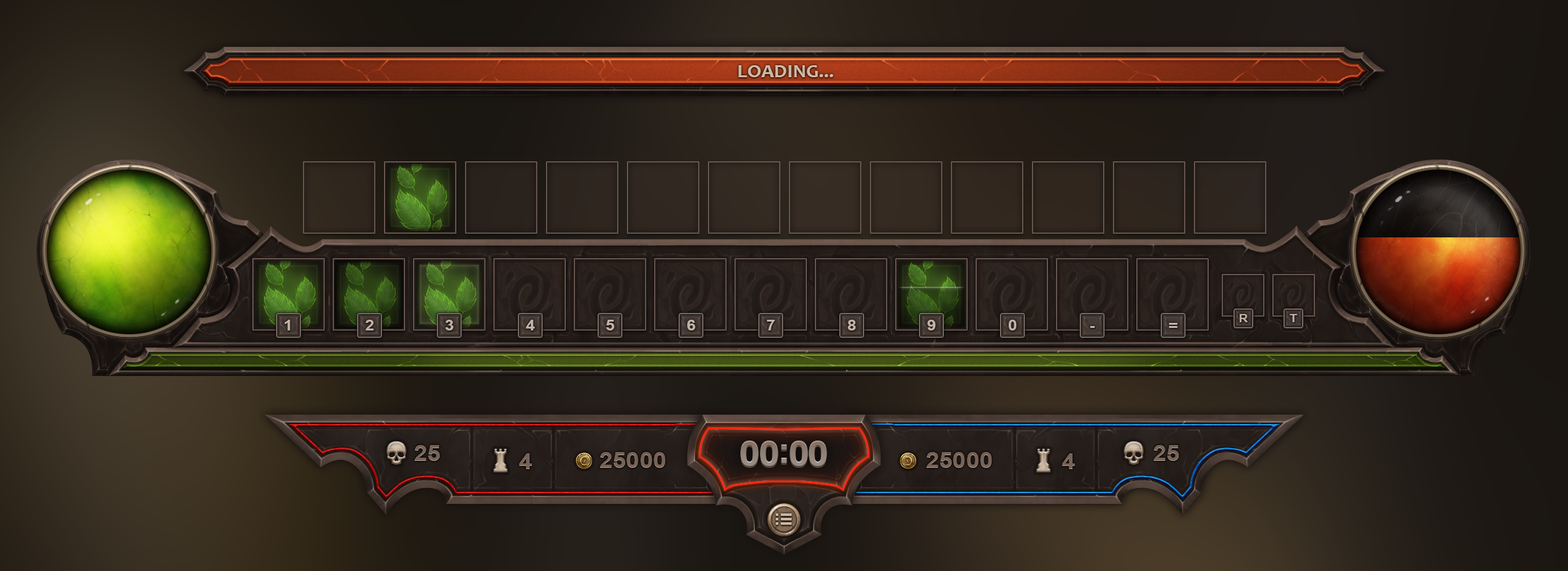
<style>
.page{position:relative;width:1568px;height:571px}
.page>*{position:absolute;margin:0}
.t1{font:18.2px "Candara-Bold";color:#cfbaa4;text-transform:uppercase;scale:1.11 1}
.t2{font:11.4px "Arial-BoldMT";color:#c4b2a8;text-transform:uppercase;scale:1.11 1}
.t3{font:14.8px "Arial-BoldMT";color:#c4b2a8;text-transform:uppercase;scale:1.11 1}
.t4{font:21.6px "Arial-BoldMT";color:#776255;text-transform:uppercase;scale:1.11 1}
.t5{font:34.2px "Arial-BoldMT";letter-spacing:-0.05em;color:#908076;text-transform:uppercase;scale:1.11 1}
.t6{font:21.5px "Arial-BoldMT";color:#776255;text-transform:uppercase;scale:1.11 1}
.t7{font:21.5px "Arial-BoldMT";color:#776255;text-transform:uppercase;scale:1.12 1}
</style>
<div class="page">
<p class="t1" style="left:738px;top:65px;width:95px;height:12px">loading...</p>
<p class="t2" style="left:1240px;top:314px;width:8px;height:8px">R</p>
<p class="t2" style="left:1290px;top:314px;width:7px;height:8px">t</p>
<p class="t3" style="left:285px;top:320px;width:5px;height:10px">1</p>
<p class="t3" style="left:365px;top:320px;width:9px;height:10px">2</p>
<p class="t3" style="left:445px;top:320px;width:9px;height:10px">3</p>
<p class="t3" style="left:526px;top:320px;width:9px;height:10px">4</p>
<p class="t3" style="left:606px;top:320px;width:8px;height:10px">5</p>
<p class="t3" style="left:687px;top:320px;width:8px;height:10px">6</p>
<p class="t3" style="left:767px;top:320px;width:8px;height:10px">7</p>
<p class="t3" style="left:848px;top:320px;width:8px;height:10px">8</p>
<p class="t3" style="left:927px;top:320px;width:9px;height:10px">9</p>
<p class="t3" style="left:1009px;top:320px;width:8px;height:10px">0</p>
<p class="t3" style="left:1169px;top:323px;width:9px;height:5px">=</p>
<p class="t4" style="left:414px;top:445px;width:26px;height:16px">25</p>
<p class="t5" style="left:740px;top:440px;width:87px;height:26px">00:00</p>
<p class="t5" style="left:740px;top:440px;width:87px;height:26px">00:00</p>
<p class="t6" style="left:1154px;top:445px;width:25px;height:16px">25</p>
<p class="t4" style="left:519px;top:453px;width:13px;height:16px">4</p>
<p class="t4" style="left:600px;top:452px;width:66px;height:16px">25000</p>
<p class="t7" style="left:926px;top:452px;width:66px;height:16px">25000</p>
<p class="t6" style="left:1062px;top:453px;width:13px;height:16px">4</p>
</div>
